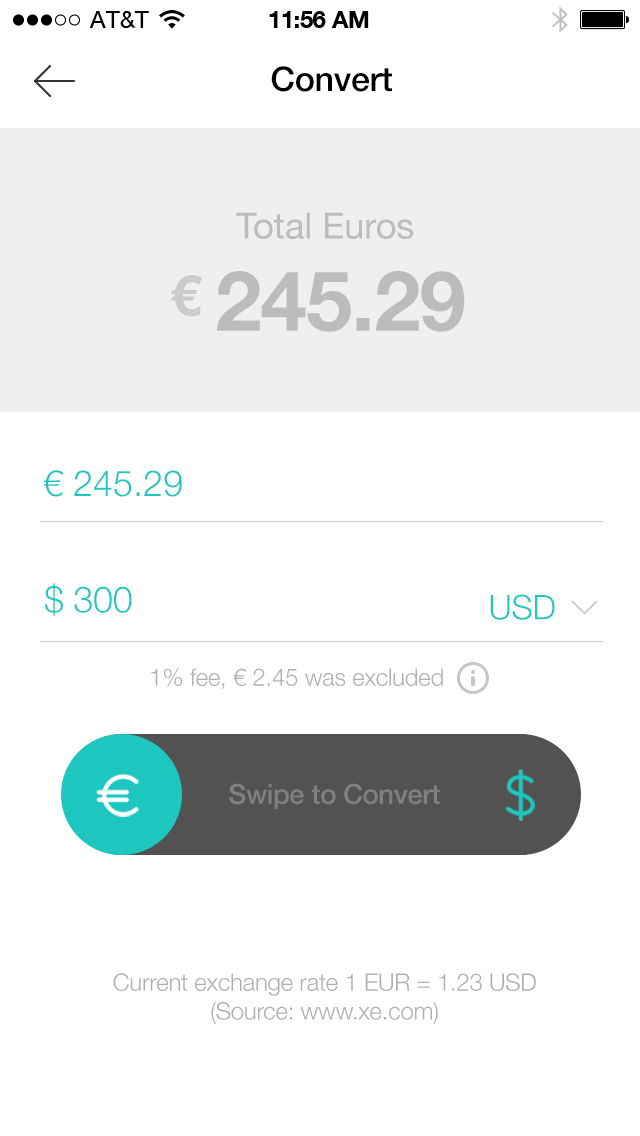
<style>
.page{position:relative;width:640px;height:1136px;background:#ffffff}
.page>*{position:absolute;margin:0}
.t1{font:34px "HelveticaNeue-Medium";letter-spacing:-0.01em;color:#000000}
.t2{font:36px "HelveticaNeue";color:#bcbcbc}
.t3{font:56px "HelveticaNeue-Bold";letter-spacing:-0.01em;color:#cbcbcb}
.t4{font:83.4px "HelveticaNeue-Bold";letter-spacing:-0.01em;color:#bcbcbc}
.t5{font:36px "HelveticaNeue-Light";color:#1ec6c0}
.t6{font:36px "HelveticaNeue-Light";letter-spacing:-0.01em;color:#1ec6c0}
.t7{font:34px "HelveticaNeue-Light";letter-spacing:-0.01em;color:#1ec6c0}
.t8{font:24px "HelveticaNeue-Light";letter-spacing:-0.01em;color:#afafaf}
.t9{font:27.1px "HelveticaNeue-Medium";letter-spacing:-0.01em;color:#7a7a7a}
</style>
<div class="page">
<p class="t1" style="left:271px;top:66px;width:121px;height:26px">Convert</p>
<p class="t2" style="left:236px;top:212px;width:178px;height:27px">Total Euros</p>
<p class="t3" style="left:170px;top:275px;width:33px;height:42px">€</p>
<p class="t4" style="left:217px;top:271px;width:248px;height:61px">245.29</p>
<p class="t5" style="left:43px;top:470px;width:139px;height:27px">€ 245.29</p>
<p class="t6" style="left:45px;top:583px;width:87px;height:33px">$ 300</p>
<p class="t7" style="left:490px;top:594px;width:65px;height:26px">USD</p>
<p class="t8" style="left:151px;top:668px;width:292px;height:21px">1% fee, € 2.45 was excluded</p>
<p class="t9" style="left:229px;top:783px;width:211px;height:26px;opacity:0.2">Swipe to Convert</p>
<p class="t8" style="left:113px;top:973px;width:423px;height:51px;text-align:center">Current exchange rate 1 EUR = 1.23 USD<br>(Source: www.xe.com)</p>
</div>
